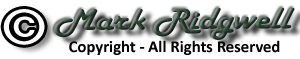
<style>
.page{position:relative;width:300px;height:59px;background:#ffffff}
.page>*{position:absolute;margin:0}
.t1{font:47.5px "LetterGothicStd-Bold";color:#000000;scale:1.49 1}
.t2{font:31.2px "HarlowSolid";color:#2b4233;scale:1.23 1}
.t3{font:16.7px "Calibri-Bold";color:#000000}
</style>
<div class="page">
<p class="t1" style="left:3px;top:9px;width:42px;height:36px">©</p>
<p class="t2" style="left:54px;top:7px;width:241px;height:33px">Mark Ridgwell</p>
<p class="t3" style="left:69px;top:40px;width:211px;height:15px">Copyright - All Rights Reserved</p>
</div>
